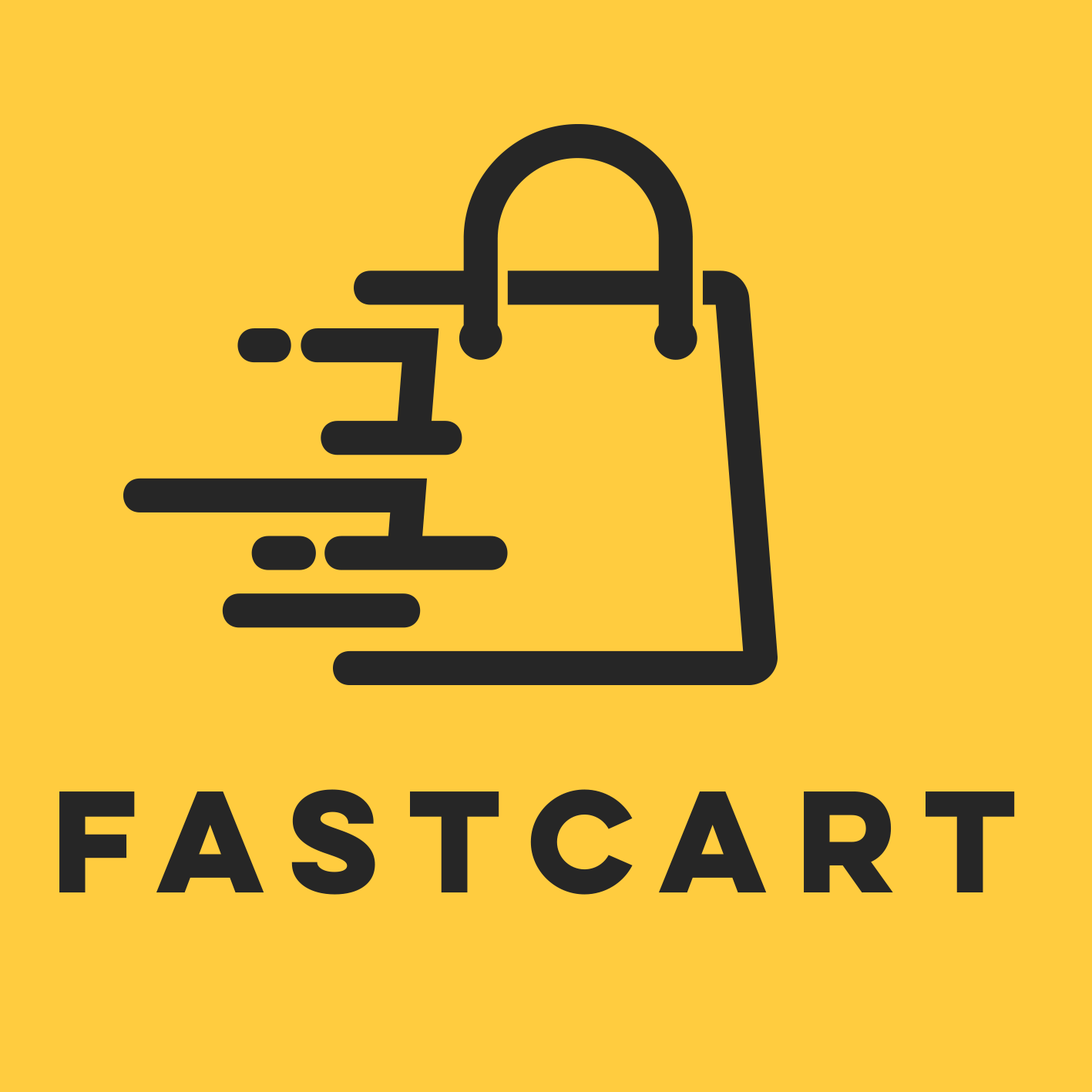
<style>
.page{position:relative;width:1092px;height:1092px;background:#ffcc3f}
.page>*{position:absolute;margin:0}
.t1{font:129.4px "LuloCleanOne-Bold";color:#262626}
</style>
<div class="page">
<p class="t1" style="left:59px;top:789px;width:956px;height:106px">Fastcart</p>
</div>
